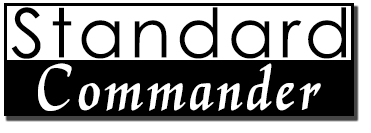
<style>
.page{position:relative;width:371px;height:133px;background:#ffffff}
.page>*{position:absolute;margin:0}
.t1{font:68px "CenturyGothic";letter-spacing:0.075em;color:#000000}
.t2{font:68px "Daniela";letter-spacing:0.075em;color:#ffffff}
</style>
<div class="page">
<p class="t1" style="left:11px;top:7px;width:335px;height:52px">Standard</p>
<p class="t2" style="left:38px;top:63px;width:283px;height:48px">Commander</p>
</div>
